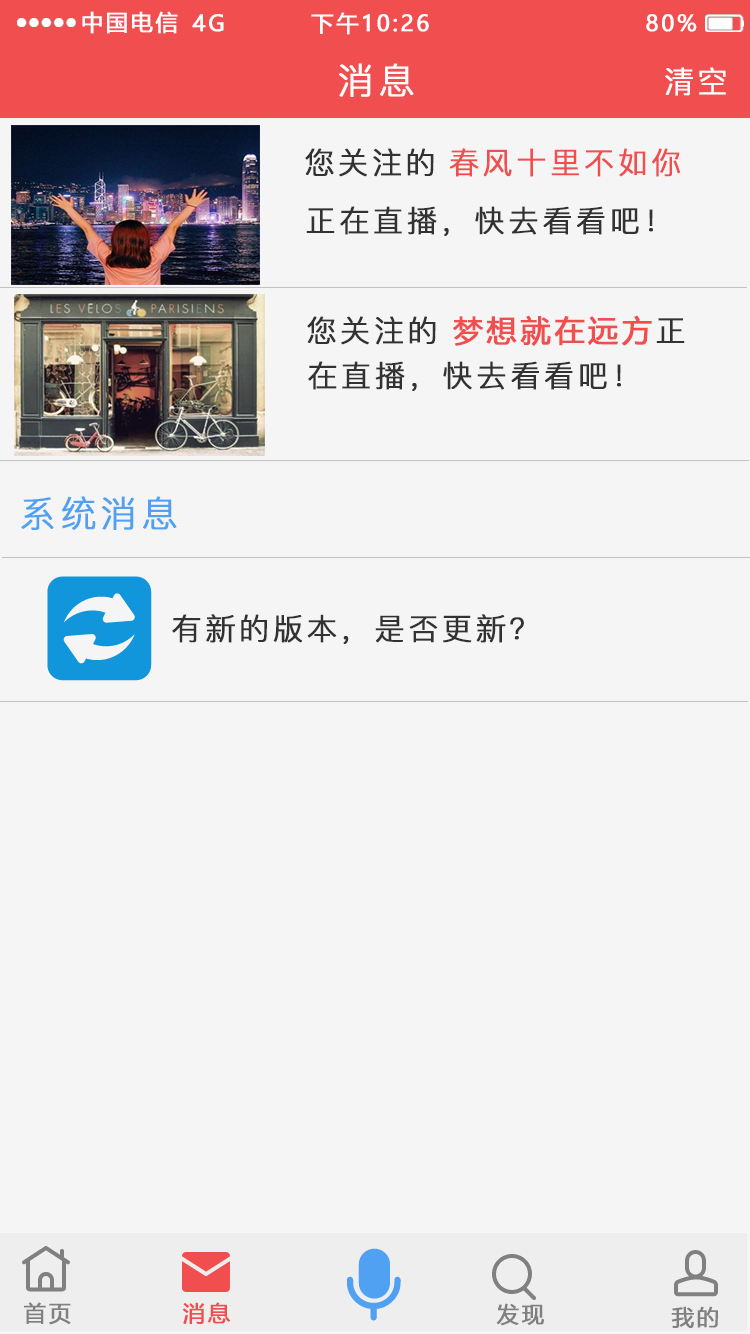
<style>
.page{position:relative;width:750px;height:1334px;background:#f5f5f5}
.page>*{position:absolute;margin:0}
.t1{font:22px "MicrosoftYaHei";letter-spacing:0.1em;color:#ffffff;text-transform:uppercase;font-weight:bold}
.t2{font:36px "PingFang-SC-Regular";letter-spacing:0.1em;color:#ffffff;text-transform:uppercase;font-weight:bold}
.t3{font:30px "PingFang-SC-Regular";letter-spacing:0.1em;color:#ffffff;text-transform:uppercase;font-weight:bold}
.t4{font:30px "PingFang-SC-Regular";letter-spacing:0.1em;color:#323233;text-transform:uppercase;font-weight:bold}
.t5{font:30px "PingFang-SC-Regular";letter-spacing:0.1em;color:#f04e4f;text-transform:uppercase;font-weight:bold}
.t6{font:30px "MicrosoftYaHei";letter-spacing:0.1em;color:#f04e4f;text-transform:uppercase;font-weight:bold}
.t7{font:36px "PingFang-SC-Regular";letter-spacing:0.1em;color:#51a1f3;text-transform:uppercase;font-weight:bold}
.t8{font:22px "MicrosoftYaHei";letter-spacing:0.1em;color:#808080;text-transform:uppercase;font-weight:bold}
.t9{font:22px "MicrosoftYaHei";letter-spacing:0.1em;color:#f04e4f;text-transform:uppercase;font-weight:bold}
</style>
<div class="page">
<p class="t1" style="left:82px;top:11px;width:96px;height:23px">中国电信</p>
<p class="t1" style="left:192px;top:14px;width:32px;height:18px">4G</p>
<p class="t1" style="left:311px;top:12px;width:118px;height:23px">下午10:26</p>
<p class="t1" style="left:646px;top:14px;width:51px;height:18px">80%</p>
<p class="t2" style="left:339px;top:63px;width:75px;height:34px">消息</p>
<p class="t3" style="left:665px;top:67px;width:61px;height:29px">清空</p>
<p class="t4" style="left:305px;top:148px;width:129px;height:29px">您关注的</p>
<p class="t5" style="left:449px;top:148px;width:231px;height:29px">春风十里不如你</p>
<p class="t4" style="left:306px;top:206px;width:347px;height:30px">正在直播，快去看看吧！</p>
<p class="t4" style="left:307px;top:316px;width:129px;height:29px">您关注的</p>
<p class="t6" style="left:453px;top:315px;width:232px;height:31px">梦想就在远方<span class="t4">正</span></p>
<p class="t4" style="left:308px;top:361px;width:313px;height:30px">在直播，快去看看吧！</p>
<p class="t7" style="left:21px;top:496px;width:156px;height:34px">系统消息</p>
<p class="t4" style="left:172px;top:614px;width:352px;height:30px">有新的版本，是否更新？</p>
<p class="t8" style="left:24px;top:1302px;width:47px;height:23px">首页</p>
<p class="t9" style="left:182px;top:1302px;width:49px;height:22px">消息</p>
<p class="t8" style="left:496px;top:1303px;width:48px;height:23px">发现</p>
<p class="t8" style="left:671px;top:1306px;width:47px;height:22px">我的</p>
</div>
